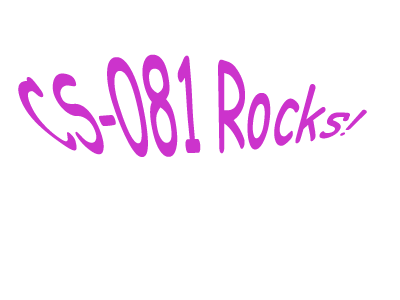
<style>
.page{position:relative;width:400px;height:300px;background:#ffffff}
.page>*{position:absolute;margin:0}
.t1{font:48px "ComicSansMS";color:#cc33cc}
</style>
<div class="page">
<p class="t1" style="left:18px;top:54px;width:349px;height:103px;text-align:center">CS-081 Rocks!</p>
</div>
